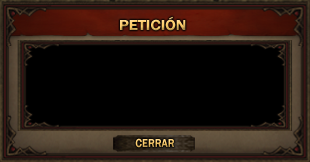
<style>
.page{position:relative;width:310px;height:162px;background:#000000}
.page>*{position:absolute;margin:0}
.t1{font:15.1px "FranklinGothic-Demi";scale:1.07 1}
.t2{font:12px "FranklinGothic-Demi";scale:0.86 1}
</style>
<div class="page">
<p class="t1" style="left:120px;top:16px;width:66px;height:15px">PETICIÓN</p>
<p class="t2" style="left:135px;top:138px;width:39px;height:10px">CERRAR</p>
</div>
